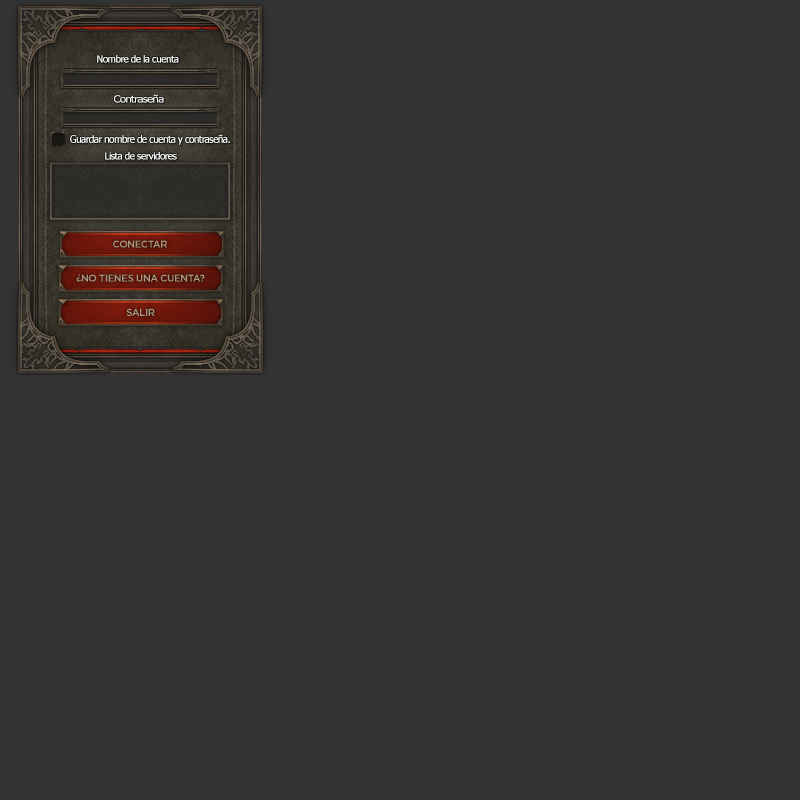
<style>
.page{position:relative;width:800px;height:800px;background:#333333}
.page>*{position:absolute;margin:0}
.t1{font:9.8px "Tahoma";letter-spacing:-0.05em;color:#ffffff}
.t2{font:9.8px "Tahoma";letter-spacing:-0.05em;color:#ffffff;scale:1.14 1}
.t3{font:10.1px "Tahoma";letter-spacing:-0.05em;color:#ffffff}
.t4{font:10px "Gotham-Bold";letter-spacing:-0.05em;color:#ae967a;text-transform:uppercase}
</style>
<div class="page">
<p class="t1" style="left:97px;top:55px;width:82px;height:8px">Nombre de la cuenta</p>
<p class="t2" style="left:114px;top:94px;width:50px;height:9px">Contraseña</p>
<p class="t3" style="left:70px;top:134px;width:160px;height:11px">Guardar nombre de cuenta y contraseña.</p>
<p class="t1" style="left:105px;top:152px;width:72px;height:8px">Lista de servidores</p>
<p class="t4" style="left:113px;top:240px;width:55px;height:8px">CONECTAR</p>
<p class="t4" style="left:76px;top:274px;width:129px;height:8px">¿No tienes una cuenta?</p>
<p class="t4" style="left:126px;top:308px;width:29px;height:8px">Salir</p>
</div>
